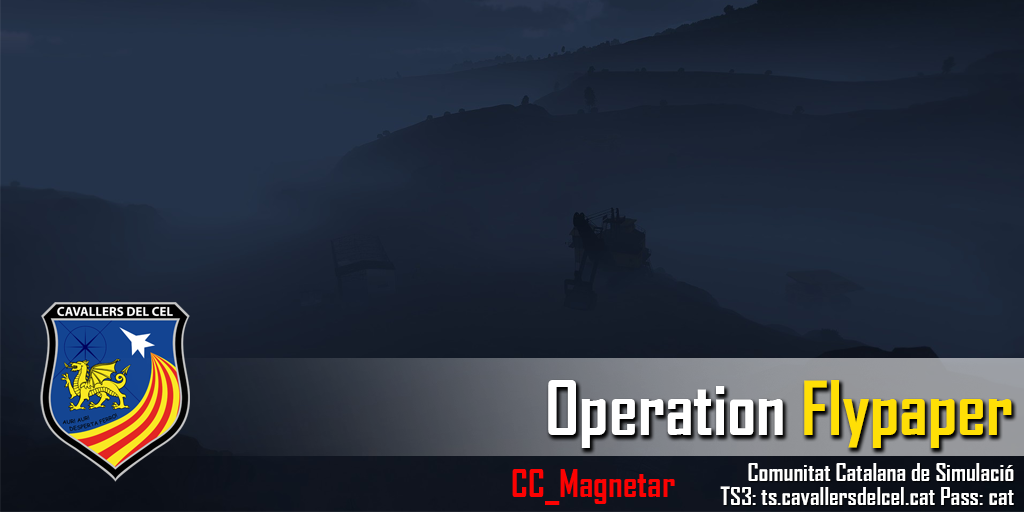
<style>
.page{position:relative;width:1024px;height:512px}
.page>*{position:absolute;margin:0}
.t1{font:72px "AgencyFB-Bold";color:#ffffff}
.t2{font:72px "AgencyFB-Bold";color:#ffdf06}
.t3{font:24px/24px "AgencyFB-Bold";color:#ffffff}
</style>
<div class="page">
<p class="t1" style="left:548px;top:380px;width:464px;height:68px">Operation<span class="t2"> Flypaper</span></p>
<p class="t3" style="left:720px;top:463px;width:294px;height:42px;text-align:right">Comunitat Catalana de Simulació<br>TS3: ts.cavallersdelcel.cat Pass: cat</p>
</div>
